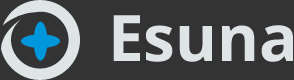
<style>
.page{position:relative;width:294px;height:80px;background:#333333}
.page>*{position:absolute;margin:0}
.t1{font:64px "OpenSans-Bold";color:#dfe5e6}
</style>
<div class="page">
<p class="t1" style="left:113px;top:15px;width:180px;height:47px">Esuna</p>
</div>
